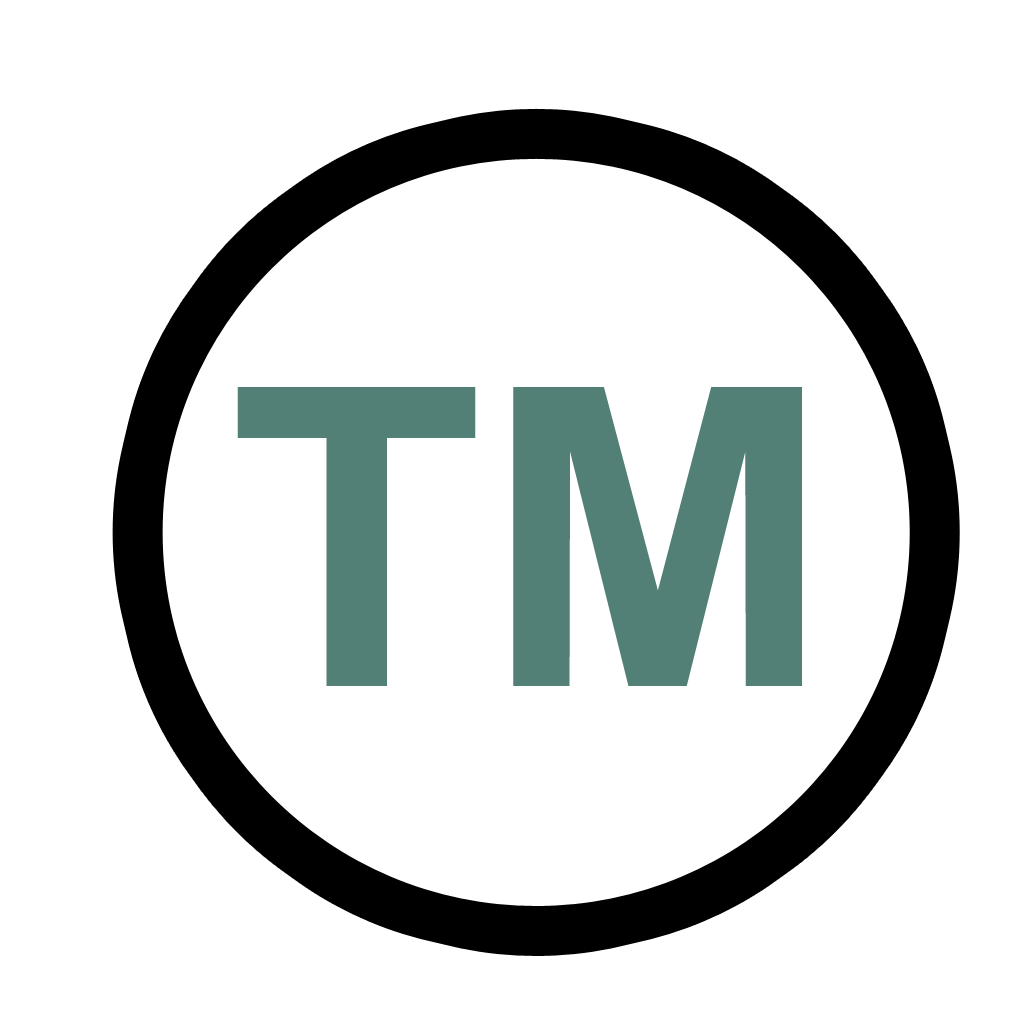
<style>
.page{position:relative;width:1024px;height:1024px;background:#ffffff}
.page>*{position:absolute;margin:0}
.t1{font:416.7px "Arial-BoldMT";color:#527f76}
</style>
<div class="page">
<p class="t1" style="left:237px;top:387px;width:565px;height:299px">TM</p>
</div>
